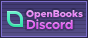
<style>
.page{position:relative;width:88px;height:38px}
.page>*{position:absolute;margin:0}
.t1{font:10px/12px "Metropolis-ExtraBold"}
.t2{font:13px/12px "Metropolis-Bold"}
</style>
<div class="page">
<p class="t1" style="left:26px;top:10px;width:57px;height:20px">OpenBooks<br><span class="t2">Discord</span></p>
<p class="t1" style="left:26px;top:10px;width:57px;height:20px">OpenBooks<br><span class="t2">Discord</span></p>
</div>
